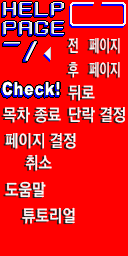
<style>
.page{position:relative;width:128px;height:256px;background:#ff0000}
.page>*{position:absolute;margin:0}
.t1{font:17px "KoreanGD15-R";color:#f8f8f8;scale:0.7 1}
.t2{font:17px "KoreanGD15-R";color:#f8f8f8;scale:0.9 1}
</style>
<div class="page">
<p class="t1" style="left:68px;top:38px;width:52px;height:16px">전   페이지</p>
<p class="t1" style="left:68px;top:62px;width:52px;height:16px">후   페이지</p>
<p class="t2" style="left:68px;top:85px;width:27px;height:16px">뒤로</p>
<p class="t2" style="left:3px;top:107px;width:58px;height:16px">목차 종료</p>
<p class="t2" style="left:69px;top:107px;width:56px;height:16px">단락 결정</p>
<p class="t2" style="left:5px;top:133px;width:71px;height:16px">페이지 결정</p>
<p class="t2" style="left:25px;top:154px;width:27px;height:17px">취소</p>
<p class="t2" style="left:5px;top:181px;width:41px;height:17px">도움말</p>
<p class="t2" style="left:22px;top:207px;width:53px;height:17px">튜토리얼</p>
</div>
